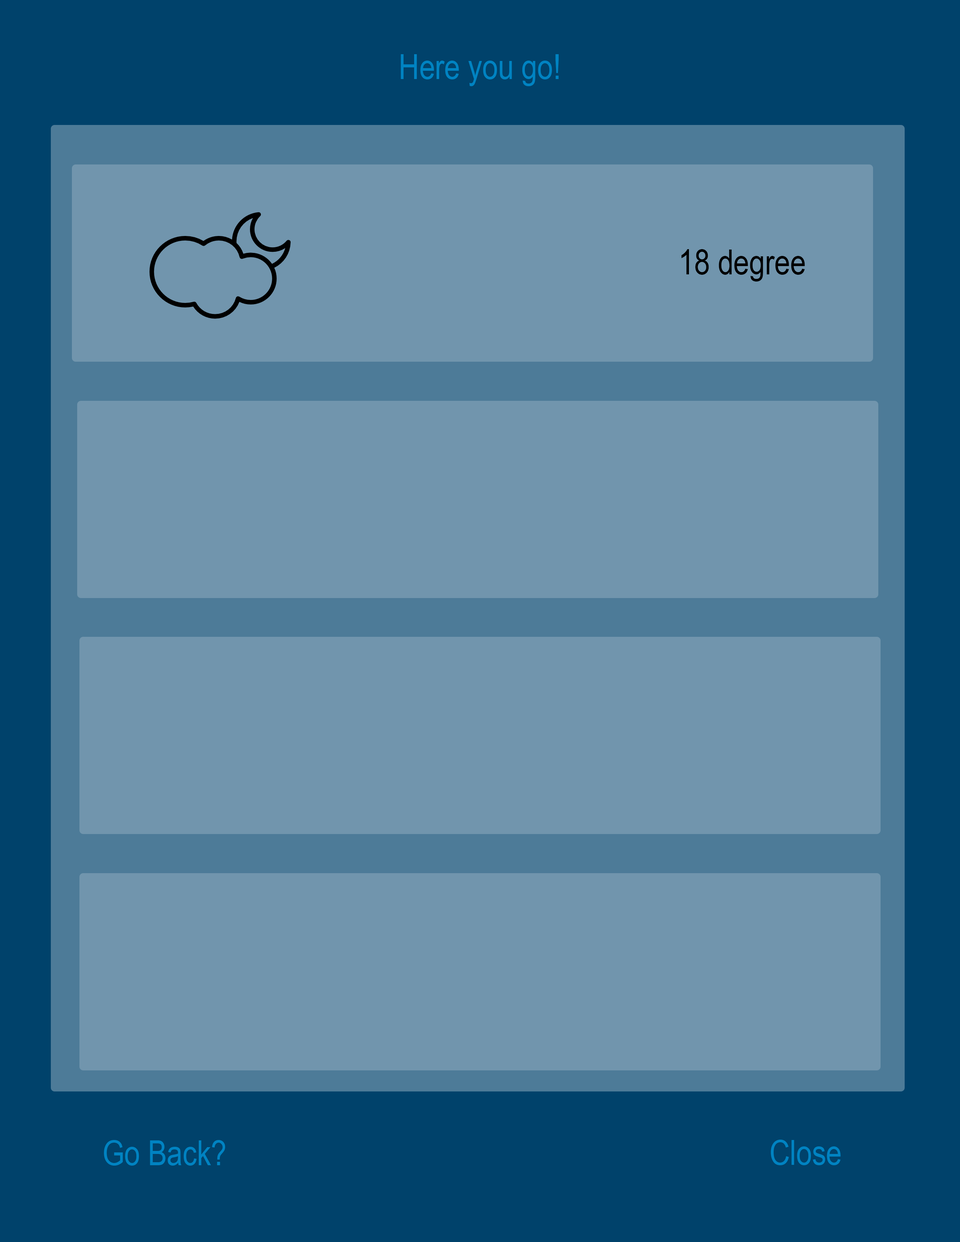
<style>
.page{position:relative;width:960px;height:1242px;background:#7195ad}
.page>*{position:absolute;margin:0}
.t1{font:34.5px "ArialNarrow";color:#0083c2}
.t2{font:34.5px "ArialNarrow";color:#000000}
</style>
<div class="page">
<p class="t1" style="left:401px;top:54px;width:158px;height:32px">Here you go!</p>
<p class="t2" style="left:681px;top:249px;width:124px;height:33px">18 degree</p>
<p class="t1" style="left:104px;top:1140px;width:121px;height:26px">Go Back?</p>
<p class="t1" style="left:771px;top:1140px;width:70px;height:25px">Close</p>
</div>
